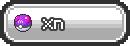
<style>
.page{position:relative;width:130px;height:46px;background:#ababab}
.page>*{position:absolute;margin:0}
.t1{font:16px "Minecraft";color:#ffffff}
</style>
<div class="page">
<p class="t1" style="left:43px;top:19px;width:20px;height:10px">xn</p>
</div>
